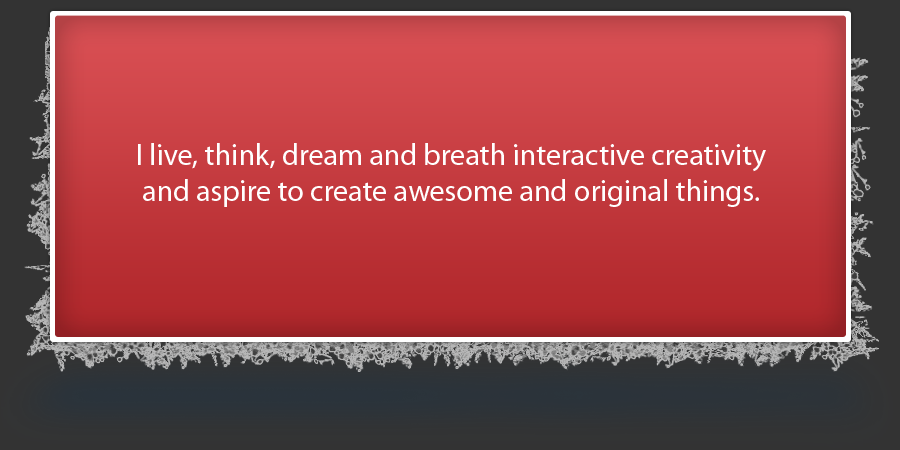
<style>
.page{position:relative;width:900px;height:450px}
.page>*{position:absolute;margin:0}
.t1{font:30px "MyriadPro-Regular";color:#ffffff}
</style>
<div class="page">
<p class="t1" style="left:138px;top:143px;width:628px;height:64px;text-align:center">I live, think, dream and breath interactive creativity<br>and aspire to create awesome and original things.</p>
</div>
